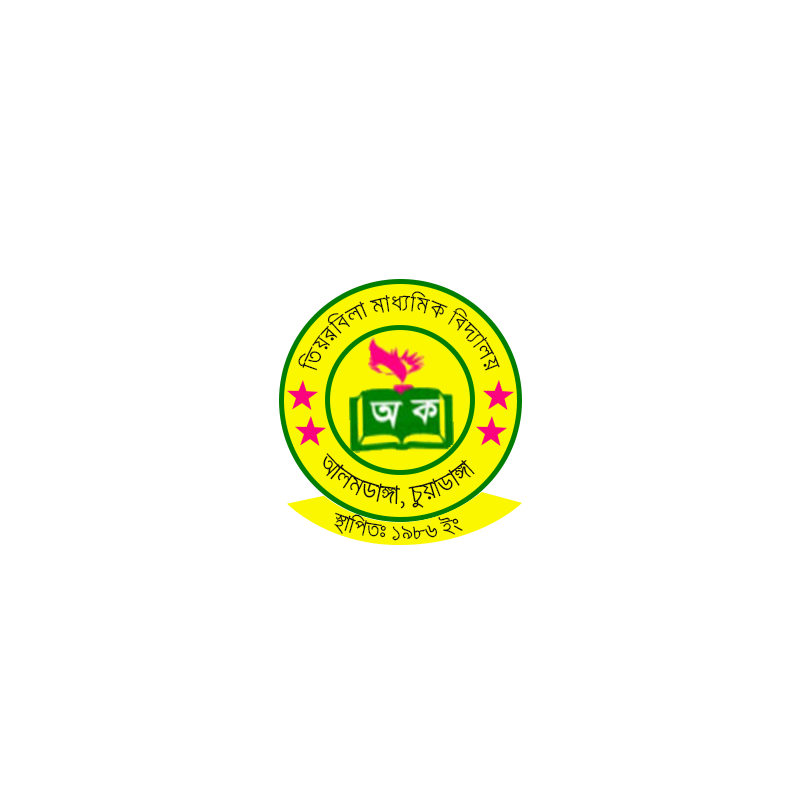
<style>
.page{position:relative;width:800px;height:800px;background:#ffffff}
.page>*{position:absolute;margin:0}
.t1{font:19.2px "SiyamRupaliANSI";color:#100f10}
.t2{font:21.4px "SiyamRupaliANSI";color:#100f10}
.t3{font:18.3px "SiyamRupaliANSI";color:#100f10}
</style>
<div class="page">
<p class="t1" style="left:298px;top:291px;width:202px;height:80px;rotate:3deg">wZqiwejv gva¨wgK we`¨vjq</p>
<p class="t2" style="left:323px;top:453px;width:152px;height:56px;rotate:-10deg">AvjgWv½v, PzqvWv½v</p>
<p class="t3" style="left:334px;top:512px;width:129px;height:29px;rotate:4deg">¯’vwcZt 1986 Bs</p>
</div>
